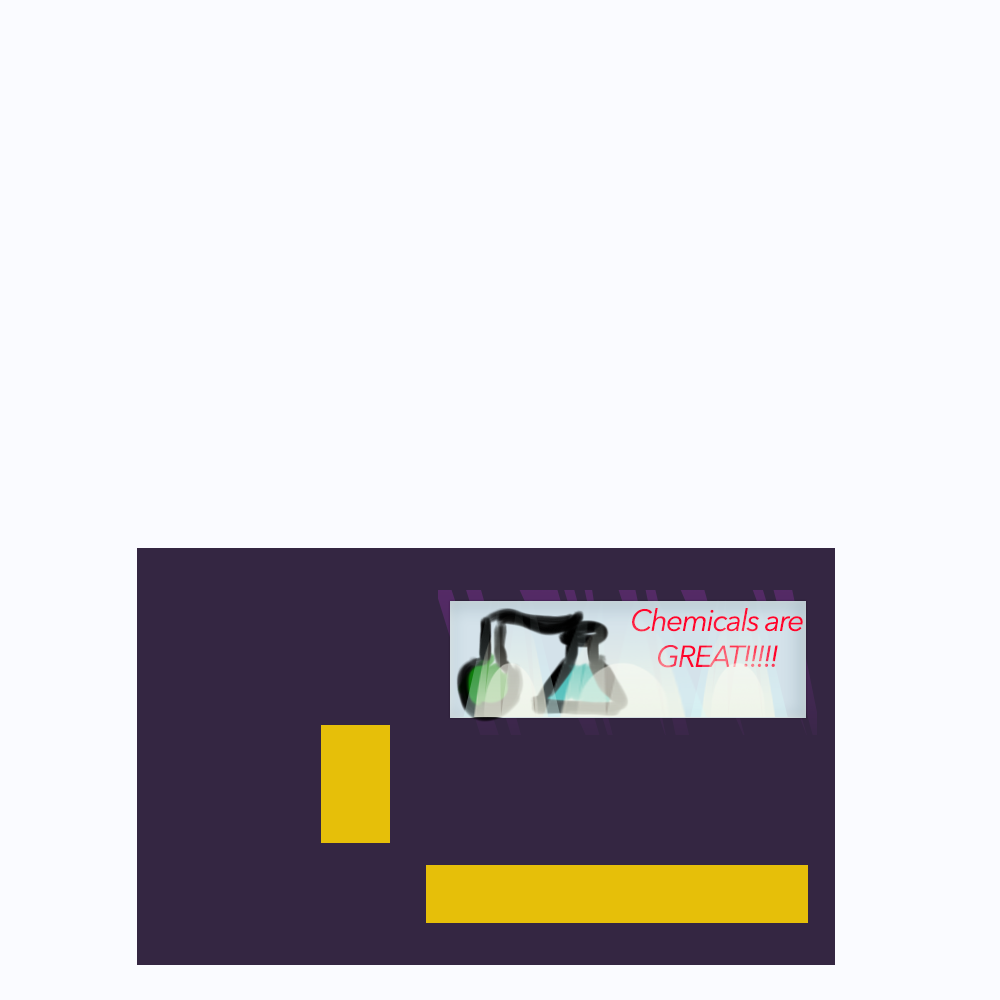
<style>
.page{position:relative;width:1000px;height:1000px;background:#fafbff}
.page>*{position:absolute;margin:0}
.t1{font:30px "AvenirNext-Italic";letter-spacing:-0.05em}
</style>
<div class="page">
<p class="t1" style="left:632px;top:608px;width:171px;height:60px;text-align:center">Chemicals are<br>GREAT!!!!!</p>
</div>
